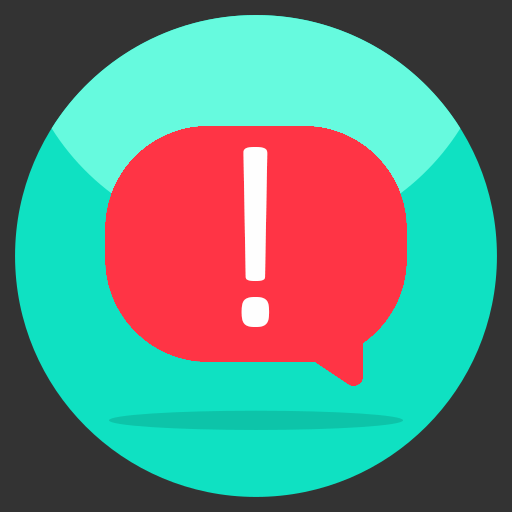
<style>
.page{position:relative;width:512px;height:512px;background:#333333}
.page>*{position:absolute;margin:0}
.t1{font:266.7px "Calibri";color:#fefefe}
</style>
<div class="page">
<p class="t1" style="left:241px;top:147px;width:29px;height:180px">!</p>
</div>
